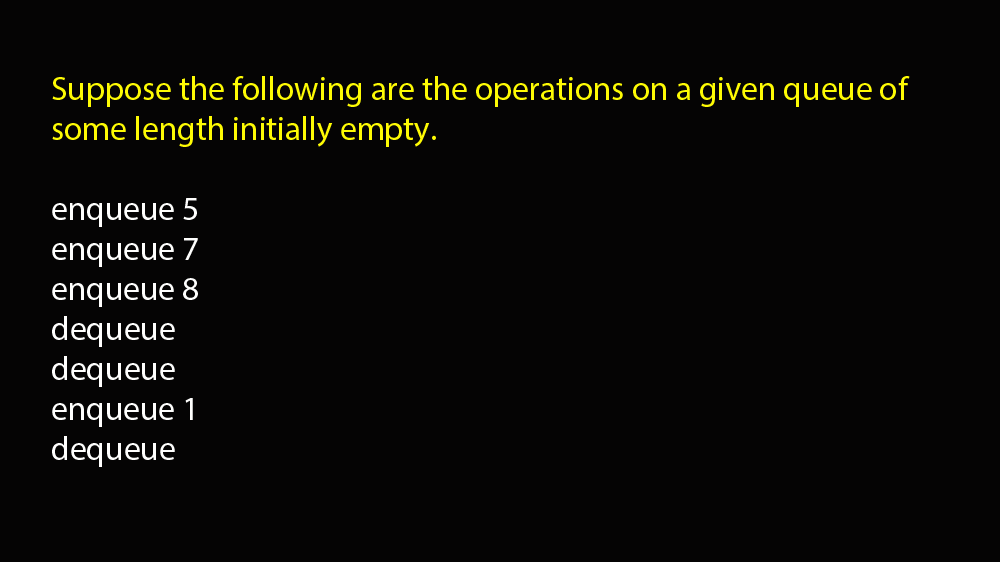
<style>
.page{position:relative;width:1000px;height:562px;background:#050404}
.page>*{position:absolute;margin:0}
.t1{font:33.3px "MyriadPro-Regular";color:#fefb04}
.t2{font:33.3px "MyriadPro-Regular";color:#fffffe}
</style>
<div class="page">
<p class="t1" style="left:52px;top:76px;width:858px;height:391px">Suppose the following are the operations on a given queue of some length initially empty. <br><br><span class="t2">enqueue 5<br>enqueue 7<br>enqueue 8<br>dequeue<br>dequeue <br>enqueue 1<br>dequeue</span></p>
</div>
